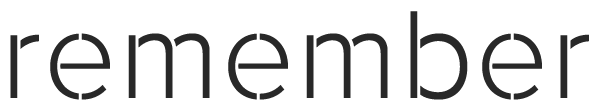
<style>
.page{position:relative;width:600px;height:110px;background:#ffffff}
.page>*{position:absolute;margin:0}
.t1{font:130px "Rafale-BG";letter-spacing:0.01em;color:#282828}
</style>
<div class="page">
<p class="t1" style="left:10px;top:11px;width:579px;height:89px">remember</p>
</div>
